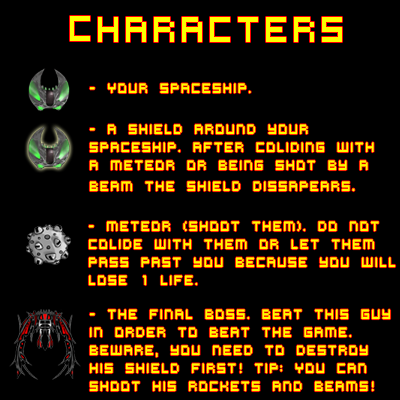
<style>
.page{position:relative;width:400px;height:400px;background:#000000}
.page>*{position:absolute;margin:0}
.t1{font:40px "VirtualDJ";color:#fcff00;scale:0.8 1}
.t2{font:15px "VirtualDJ";color:#fcff00;scale:0.8 1}
.t3{font:17px "VirtualDJ";color:#fcff00;scale:0.8 1}
</style>
<div class="page">
<p class="t1" style="left:70px;top:16px;width:272px;height:26px">CHARACTERS</p>
<p class="t2" style="left:89px;top:83px;width:162px;height:11px">- YOUR SPACESHIP.</p>
<p class="t2" style="left:89px;top:124px;width:285px;height:68px">- a shield around your <br>spaceship. After coliding with a meteor or being shot by a beam the shield dissapears<span class="t3">.</span></p>
<p class="t2" style="left:88px;top:221px;width:308px;height:65px">- Meteor (shoot them). do not colide with them Or let them pass past you because you will lose 1 life.</p>
<p class="t2" style="left:89px;top:309px;width:302px;height:83px">- The final Boss. Beat this guy<br>in order to BEAT the game. Beware, you need to destroy his shield first! Tip: You can SHOOT HIS ROCKETS AND BEAMS!</p>
</div>
